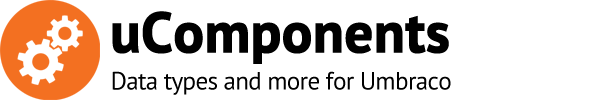
<style>
.page{position:relative;width:590px;height:100px;background:#ffffff}
.page>*{position:absolute;margin:0}
.t1{font:56px "PTSans-Bold";letter-spacing:-0.01em;color:#000000;font-weight:bold}
.t2{font:25px "PTSans-Regular";letter-spacing:-0.025em;color:#000000}
</style>
<div class="page">
<p class="t1" style="left:112px;top:11px;width:337px;height:53px">uComponents</p>
<p class="t2" style="left:112px;top:71px;width:339px;height:24px">Data types and more for Umbraco</p>
</div>
